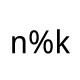
<style>
.page{position:relative;width:80px;height:80px;background:#ffffff}
.page>*{position:absolute;margin:0}
.t1{font:31.8px "DroidSans";color:#000000}
</style>
<div class="page">
<p class="t1" style="left:12px;top:29px;width:58px;height:25px">n%k</p>
</div>
